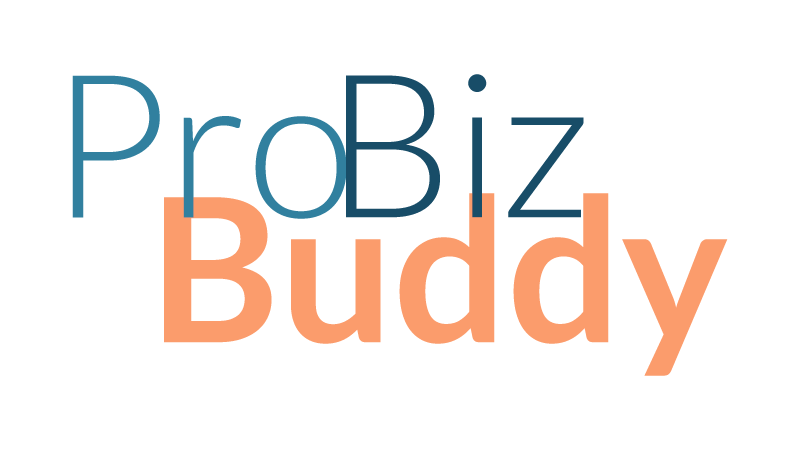
<style>
.page{position:relative;width:800px;height:450px;background:#ffffff}
.page>*{position:absolute;margin:0}
.t1{font:200px "Lato-Light";color:#31809f}
.t2{font:200px "Lato-Light";color:#184d68}
.t3{font:200px "Lato-Bold";color:#fb9c6c}
</style>
<div class="page">
<p class="t1" style="left:72px;top:75px;width:275px;height:144px">Pro</p>
<p class="t2" style="left:346px;top:74px;width:238px;height:144px">Biz</p>
<p class="t3" style="left:164px;top:193px;width:564px;height:183px">Buddy</p>
</div>
